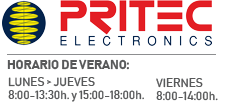
<style>
.page{position:relative;width:226px;height:105px;background:#ffffff}
.page>*{position:absolute;margin:0}
.t1{font:12.5px "Bahnschrift-Bold";color:#58595a}
.t2{font:11.6px "Bahnschrift";color:#58595a}
</style>
<div class="page">
<p class="t1" style="left:7px;top:59px;width:122px;height:11px">HORARIO DE VERANO:</p>
<p class="t2" style="left:8px;top:77px;width:136px;height:25px">LUNES &gt; JUEVES<br>8:00-13:30h. y 15:00-18:00h.</p>
<p class="t2" style="left:156px;top:78px;width:62px;height:23px">VIERNES<br>8:00-14:00h.</p>
</div>
